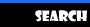
<style>
.page{position:relative;width:90px;height:27px;background:#000000}
.page>*{position:absolute;margin:0}
.t1{font:14px "ShowcardGothic-Reg";color:#ffffff}
</style>
<div class="page">
<p class="t1" style="left:35px;top:10px;width:52px;height:12px">search</p>
</div>
